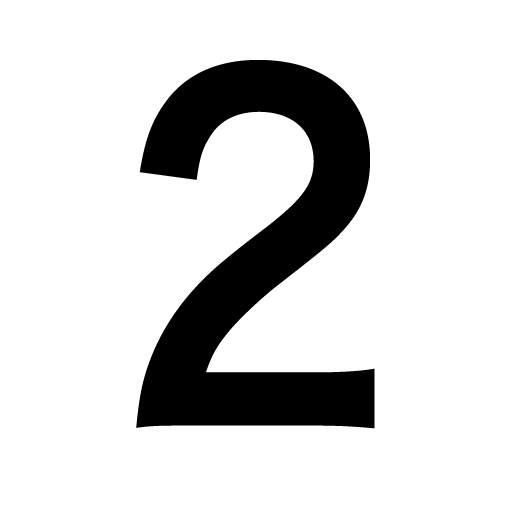
<style>
.page{position:relative;width:512px;height:512px;background:#ffffff}
.page>*{position:absolute;margin:0}
.t1{font:450px "HiraKakuPro-W6";color:#000000;scale:0.88 1}
</style>
<div class="page">
<p class="t1" style="left:136px;top:60px;width:239px;height:369px">2</p>
</div>
